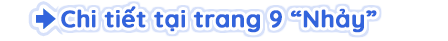
<style>
.page{position:relative;width:448px;height:41px;background:#ffffff}
.page>*{position:absolute;margin:0}
.t1{font:24px "Quicksand-Bold";color:#3264dc;font-weight:bold}
</style>
<div class="page">
<p class="t1" style="left:61px;top:6px;width:316px;height:27px">Chi tiết tại trang 9 “Nhảy”</p>
</div>
